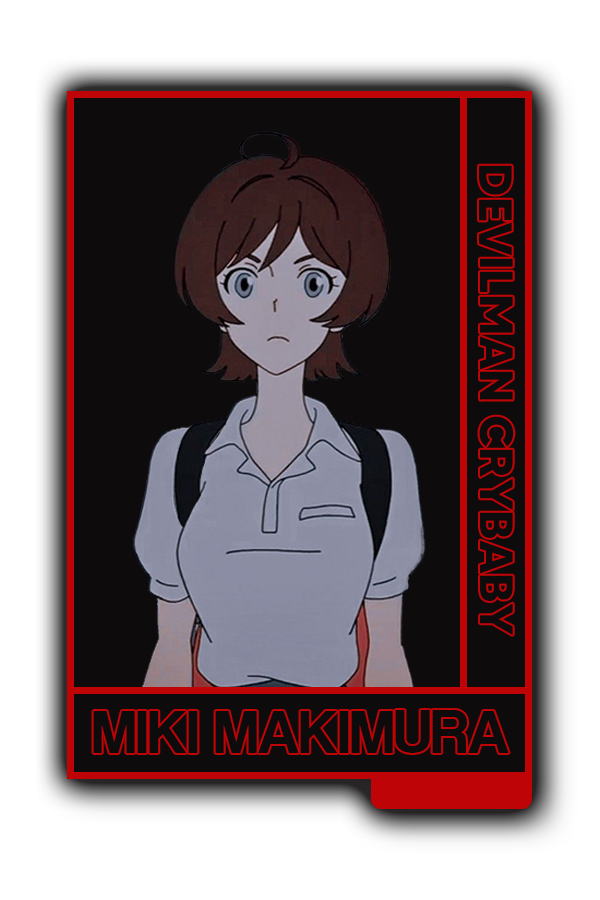
<style>
.page{position:relative;width:600px;height:900px;background:#0d0b0b}
.page>*{position:absolute;margin:0}
.t1{font:46.8px "MADETOMMY-Bold";color:#0d0b0b}
.t2{font:63.8px "CoolveticaRg-Regular";color:#0d0b0b}
</style>
<div class="page">
<p class="t1" style="left:479px;top:165px;width:35px;height:470px;rotate:90deg">DEVILMAN CRYBABY</p>
<p class="t2" style="left:93px;top:710px;width:416px;height:43px">MIKI MAKIMURA</p>
</div>
